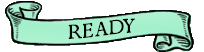
<style>
.page{position:relative;width:204px;height:52px;background:#ffffff}
.page>*{position:absolute;margin:0}
.t1{font:24px "Perpetua";color:#000000}
</style>
<div class="page">
<p class="t1" style="left:68px;top:18px;width:67px;height:21px">READY</p>
</div>
